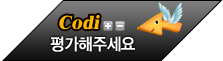
<style>
.page{position:relative;width:223px;height:61px;background:#ffffff}
.page>*{position:absolute;margin:0}
.t1{font:19.5px "Dutch801BT-ExtraBold";color:#ffb400;font-style:italic}
.t2{font:17px "YDIYGO330";letter-spacing:-0.025em;color:#ffffff;font-weight:bold;scale:0.91 1}
</style>
<div class="page">
<p class="t1" style="left:59px;top:15px;width:41px;height:15px">Codi</p>
<p class="t1" style="left:59px;top:15px;width:41px;height:15px">Codi</p>
<p class="t2" style="left:50px;top:36px;width:85px;height:16px">평가해주세요</p>
</div>
